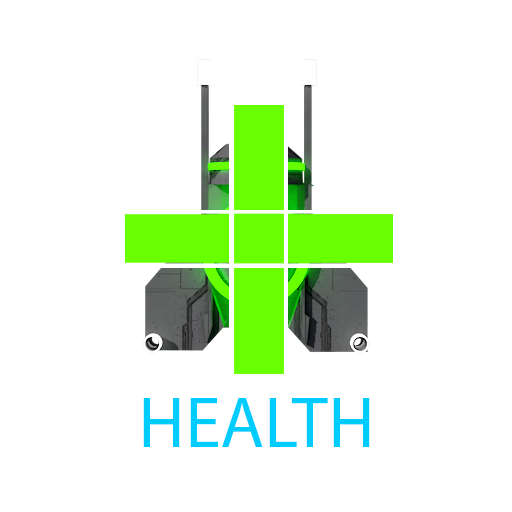
<style>
.page{position:relative;width:512px;height:512px;background:#ffffff}
.page>*{position:absolute;margin:0}
.t1{font:72px "MyriadPro-Regular";color:#00ccff}
</style>
<div class="page">
<p class="t1" style="left:143px;top:398px;width:227px;height:49px">HEALTH</p>
</div>
